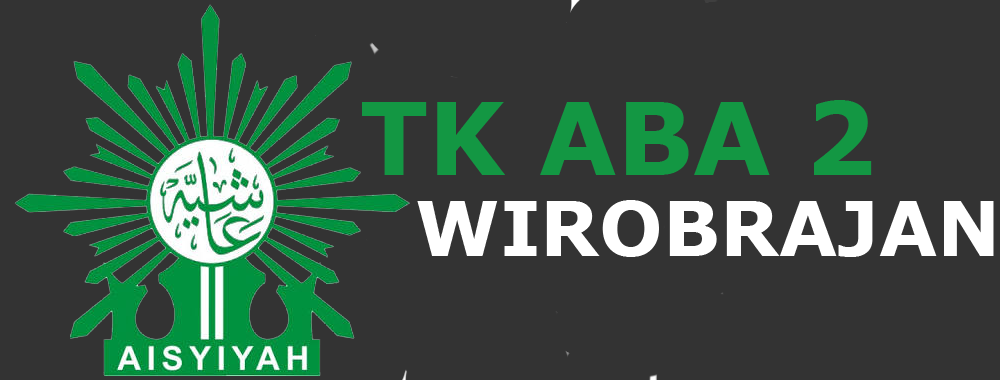
<style>
.page{position:relative;width:1000px;height:380px;background:#333333}
.page>*{position:absolute;margin:0}
.t1{font:100px "Verdana-Bold";color:#139743}
.t2{font:75px "Verdana-Bold";color:#ffffff}
</style>
<div class="page">
<p class="t1" style="left:362px;top:100px;width:510px;height:75px">TK ABA 2</p>
<p class="t2" style="left:417px;top:200px;width:577px;height:57px">WIROBRAJAN</p>
</div>
